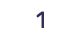
<style>
.page{position:relative;width:80px;height:40px;background:#ffffff}
.page>*{position:absolute;margin:0}
.t1{font:24px "CoHeadlineCorp-Regular";letter-spacing:-0.025em;color:#342c59;scale:0.95 1}
</style>
<div class="page">
<p class="t1" style="left:36px;top:11px;width:8px;height:17px">1</p>
</div>
